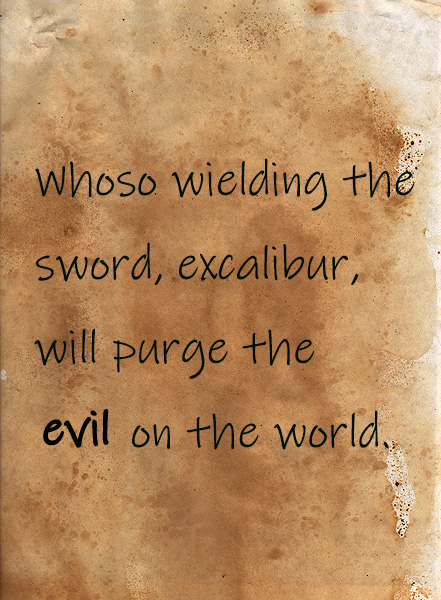
<style>
.page{position:relative;width:441px;height:600px}
.page>*{position:absolute;margin:0}
.t1{font:48px "InkFree";color:#011005}
</style>
<div class="page">
<p class="t1" style="left:34px;top:158px;width:381px;height:292px">Whoso wielding the<br>sword, excalibur, <br>will purge the<br>       on the world.</p>
</div>
